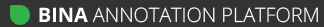
<style>
.page{position:relative;width:324px;height:27px;background:#333333}
.page>*{position:absolute;margin:0}
.t1{font:20px "OpenSans-Light";color:#feffff}
.t2{font:20px "OpenSans-Bold";color:#feffff}
</style>
<div class="page">
<p class="t1" style="left:39px;top:7px;width:279px;height:16px"><span class="t2">BINA </span>ANNOTATION PLATFORM</p>
</div>
